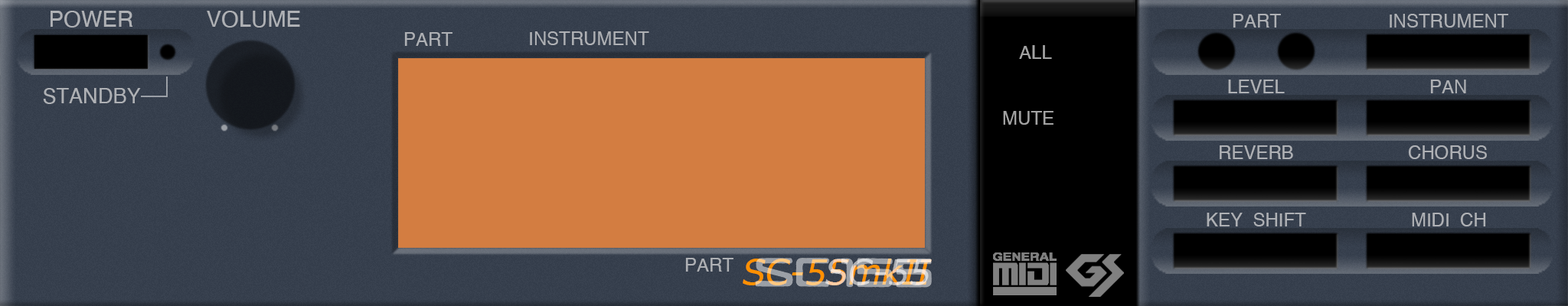
<style>
.page{position:relative;width:1568px;height:306px;background:#d37d41}
.page>*{position:absolute;margin:0}
.t1{font:22.4px "Helvetica";color:#aeb0b4}
.t2{font:18.4px "Helvetica";color:#aeb0b4}
.t3{font:18.4px "Helvetica";color:#aeb1b5}
.t4{font:18.4px "Helvetica";color:#a3a3a3}
.t5{font:20.8px "Helvetica";color:#aeb0b4}
.t6{font:18.4px "Helvetica";color:#aeb0b5}
.t7{font:34.2px "Verdana-Italic"}
</style>
<div class="page">
<p class="t1" style="left:51px;top:11px;width:81px;height:17px">POWER</p>
<p class="t1" style="left:207px;top:11px;width:93px;height:17px">VOLUME</p>
<p class="t2" style="left:1233px;top:14px;width:48px;height:14px">PART</p>
<p class="t3" style="left:1390px;top:14px;width:118px;height:14px">INSTRUMENT</p>
<p class="t2" style="left:404px;top:32px;width:48px;height:14px">PART</p>
<p class="t2" style="left:530px;top:31px;width:119px;height:14px">INSTRUMENT</p>
<p class="t4" style="left:1019px;top:45px;width:33px;height:14px">ALL</p>
<p class="t5" style="left:43px;top:88px;width:98px;height:16px">STANDBY</p>
<p class="t2" style="left:1228px;top:80px;width:57px;height:13px">LEVEL</p>
<p class="t6" style="left:1430px;top:80px;width:36px;height:13px">PAN</p>
<p class="t4" style="left:1003px;top:111px;width:51px;height:14px">MUTE</p>
<p class="t2" style="left:1220px;top:145px;width:73px;height:14px">REVERB</p>
<p class="t2" style="left:1408px;top:145px;width:79px;height:14px">CHORUS</p>
<p class="t2" style="left:1207px;top:213px;width:99px;height:14px">KEY  SHIFT</p>
<p class="t2" style="left:1412px;top:213px;width:74px;height:14px">MIDI  CH</p>
<p class="t6" style="left:685px;top:258px;width:48px;height:14px">PART</p>
<p class="t7" style="left:743px;top:259px;width:189px;height:27px">SC-55mkII</p>
<p class="t7" style="left:825px;top:259px;width:107px;height:27px">SC-55</p>
</div>
